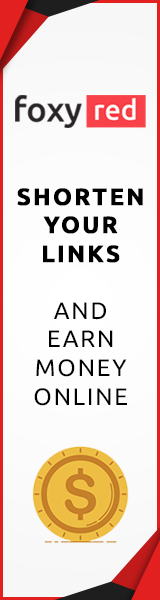
<style>
.page{position:relative;width:160px;height:600px}
.page>*{position:absolute;margin:0}
.t1{font:23.8px "Ubuntu";letter-spacing:0.075em;color:#000000;text-transform:uppercase}
.t2{font:23.8px "Ubuntu-Bold";letter-spacing:0.075em;color:#000000;text-transform:uppercase;font-weight:bold}
</style>
<div class="page">
<p class="t1" style="left:17px;top:188px;width:126px;height:218px;text-align:center"><span class="t2">Shorten<br>your<br>links<br></span><br>And<br>earn<br>money<br>Online</p>
</div>
